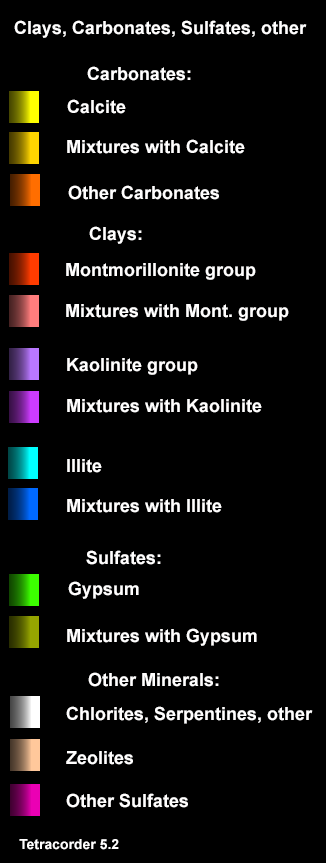
<style>
.page{position:relative;width:326px;height:863px;background:#000000}
.page>*{position:absolute;margin:0}
.t1{font:18px "Arial-BoldMT";color:#fffefe}
.t2{font:14px "Arial-BoldMT";color:#fffefe}
</style>
<div class="page">
<p class="t1" style="left:14px;top:20px;width:293px;height:18px">Clays, Carbonates, Sulfates, other</p>
<p class="t1" style="left:87px;top:66px;width:104px;height:15px">Carbonates:</p>
<p class="t1" style="left:67px;top:99px;width:59px;height:15px">Calcite</p>
<p class="t1" style="left:67px;top:139px;width:178px;height:15px">Mixtures with Calcite</p>
<p class="t1" style="left:68px;top:185px;width:151px;height:15px">Other Carbonates</p>
<p class="t1" style="left:89px;top:226px;width:53px;height:18px">Clays:</p>
<p class="t1" style="left:66px;top:263px;width:190px;height:17px">Montmorillonite group</p>
<p class="t1" style="left:66px;top:304px;width:223px;height:17px">Mixtures with Mont. group</p>
<p class="t1" style="left:67px;top:358px;width:131px;height:17px">Kaolinite group</p>
<p class="t1" style="left:67px;top:399px;width:195px;height:14px">Mixtures with Kaolinite</p>
<p class="t1" style="left:67px;top:459px;width:35px;height:14px">Illite</p>
<p class="t1" style="left:67px;top:499px;width:155px;height:14px">Mixtures with Illite</p>
<p class="t1" style="left:86px;top:550px;width:75px;height:15px">Sulfates:</p>
<p class="t1" style="left:68px;top:581px;width:71px;height:18px">Gypsum</p>
<p class="t1" style="left:67px;top:628px;width:190px;height:18px">Mixtures with Gypsum</p>
<p class="t1" style="left:88px;top:672px;width:131px;height:15px">Other Minerals:</p>
<p class="t1" style="left:66px;top:706px;width:247px;height:18px">Chlorites, Serpentines, other</p>
<p class="t1" style="left:66px;top:751px;width:67px;height:14px">Zeolites</p>
<p class="t1" style="left:66px;top:793px;width:122px;height:15px">Other Sulfates</p>
<p class="t2" style="left:19px;top:839px;width:100px;height:11px">Tetracorder 5.2</p>
</div>
